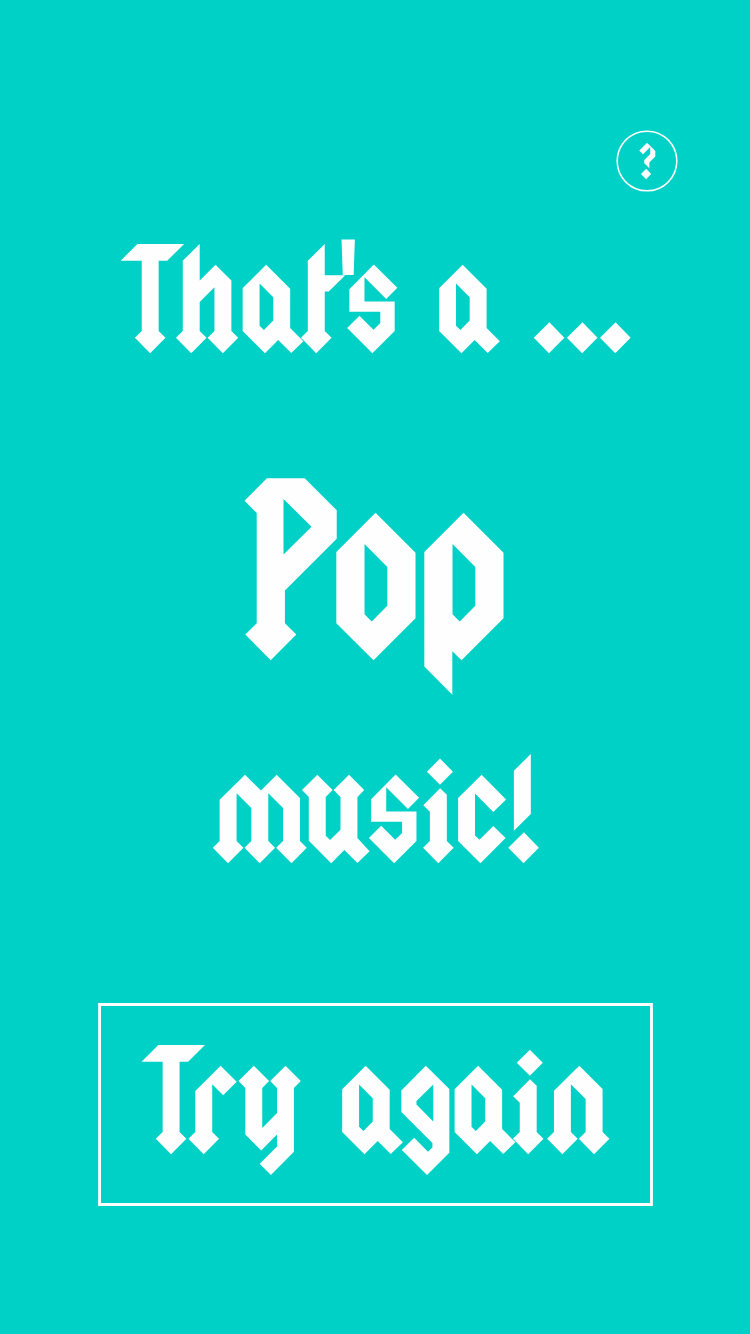
<style>
.page{position:relative;width:750px;height:1334px;background:#00d1c6}
.page>*{position:absolute;margin:0}
.t1{font:40px "Squealer";color:#fffefe}
.t2{font:120px "Squealer";color:#fffefe}
.t3{font:200px "Squealer";color:#fffefe}
</style>
<div class="page">
<p class="t1" style="left:639px;top:142px;width:17px;height:38px">?</p>
<p class="t2" style="left:120px;top:239px;width:511px;height:115px">That's a ...</p>
<p class="t3" style="left:244px;top:478px;width:260px;height:217px">Pop</p>
<p class="t2" style="left:212px;top:753px;width:327px;height:111px">music!</p>
<p class="t2" style="left:141px;top:1044px;width:469px;height:132px">Try again</p>
</div>
